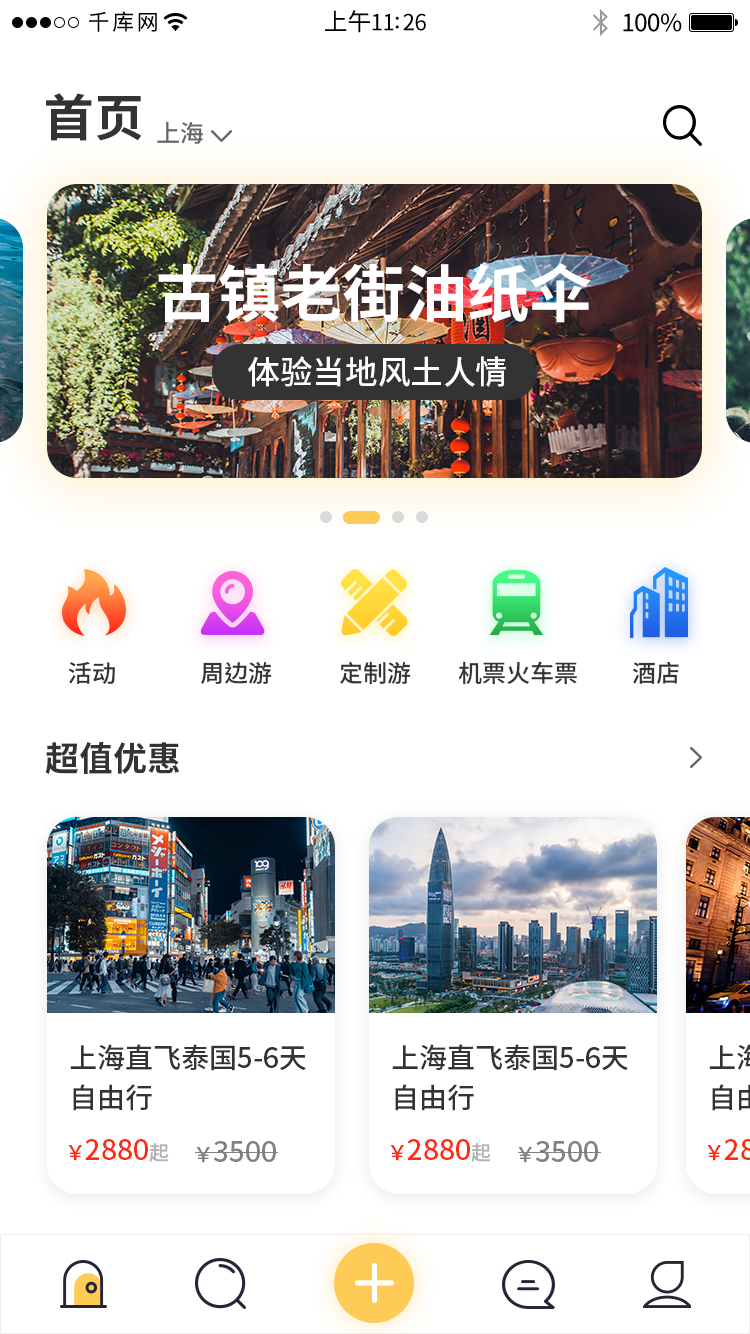
<style>
.page{position:relative;width:750px;height:1334px;background:#ffffff}
.page>*{position:absolute;margin:0}
.t1{font:50px "SourceHanSansSC-Bold";color:#333333}
.t2{font:24px "SourceHanSansSC-Medium";color:#666666}
.t3{font:62.3px "SourceHanSansSC-Bold";color:#ffffff}
.t4{font:32.6px "SourceHanSansSC-Medium";color:#fffefe}
.t5{font:24px "SourceHanSansSC-Medium";color:#333333}
.t6{font:34px "SourceHanSansSC-Bold";color:#333333}
.t7{font:28px/40px "SourceHanSansSC-Medium";color:#333333}
.t8{font:28px "SourceHanSansSC-Medium";color:#ff2a15}
.t9{font:20px "SourceHanSansSC-Medium";color:#ff2a15}
.t10{font:20px "SourceHanSansSC-Medium";color:#b2b2b2}
.t11{font:28px "SourceHanSansSC-Medium";color:#818181}
.t12{font:20px "SourceHanSansSC-Medium";color:#818181}
</style>
<div class="page">
<p class="t1" style="left:46px;top:93px;width:96px;height:48px">首页</p>
<p class="t2" style="left:157px;top:121px;width:46px;height:23px">上海</p>
<p class="t3" style="left:158px;top:263px;width:433px;height:60px">古镇老街油纸伞</p>
<p class="t4" style="left:248px;top:356px;width:258px;height:31px">体验当地风土人情</p>
<p class="t5" style="left:68px;top:661px;width:47px;height:23px">活动</p>
<p class="t5" style="left:201px;top:661px;width:71px;height:23px">周边游</p>
<p class="t5" style="left:340px;top:661px;width:71px;height:24px">定制游</p>
<p class="t5" style="left:458px;top:661px;width:119px;height:24px">机票火车票</p>
<p class="t5" style="left:632px;top:661px;width:47px;height:23px">酒店</p>
<p class="t6" style="left:45px;top:742px;width:134px;height:32px">超值优惠</p>
<p class="t7" style="left:70px;top:1044px;width:236px;height:67px">上海直飞泰国5-6天<br>自由行</p>
<p class="t7" style="left:392px;top:1044px;width:236px;height:67px">上海直飞泰国5-6天<br>自由行</p>
<p class="t8" style="left:68px;top:1139px;width:101px;height:23px"><span class="t9">￥</span>2880<span class="t10">起</span></p>
<p class="t11" style="left:196px;top:1141px;width:80px;height:22px"><span class="t12">￥</span>3500</p>
<p class="t8" style="left:390px;top:1139px;width:101px;height:23px"><span class="t9">￥</span>2880<span class="t10">起</span></p>
<p class="t11" style="left:518px;top:1141px;width:80px;height:22px"><span class="t12">￥</span>3500</p>
</div>
